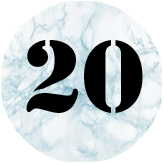
<style>
.page{position:relative;width:164px;height:164px;background:#ffffff}
.page>*{position:absolute;margin:0}
.t1{font:95.5px "StencilStd";color:#000000}
</style>
<div class="page">
<p class="t1" style="left:26px;top:40px;width:117px;height:73px">20</p>
</div>
